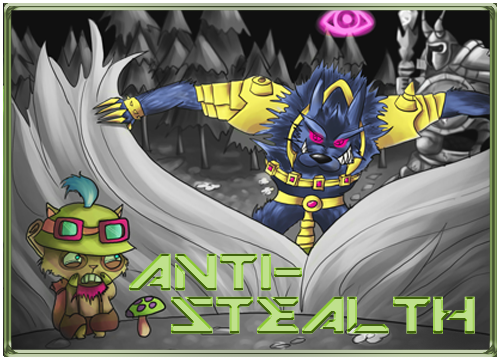
<style>
.page{position:relative;width:500px;height:360px}
.page>*{position:absolute;margin:0}
.t1{font:36.2px "Mechsuit";font-weight:bold}
</style>
<div class="page">
<p class="t1" style="left:129px;top:253px;width:346px;height:81px;text-align:center">ANTI-<br>    STEALTH</p>
</div>
